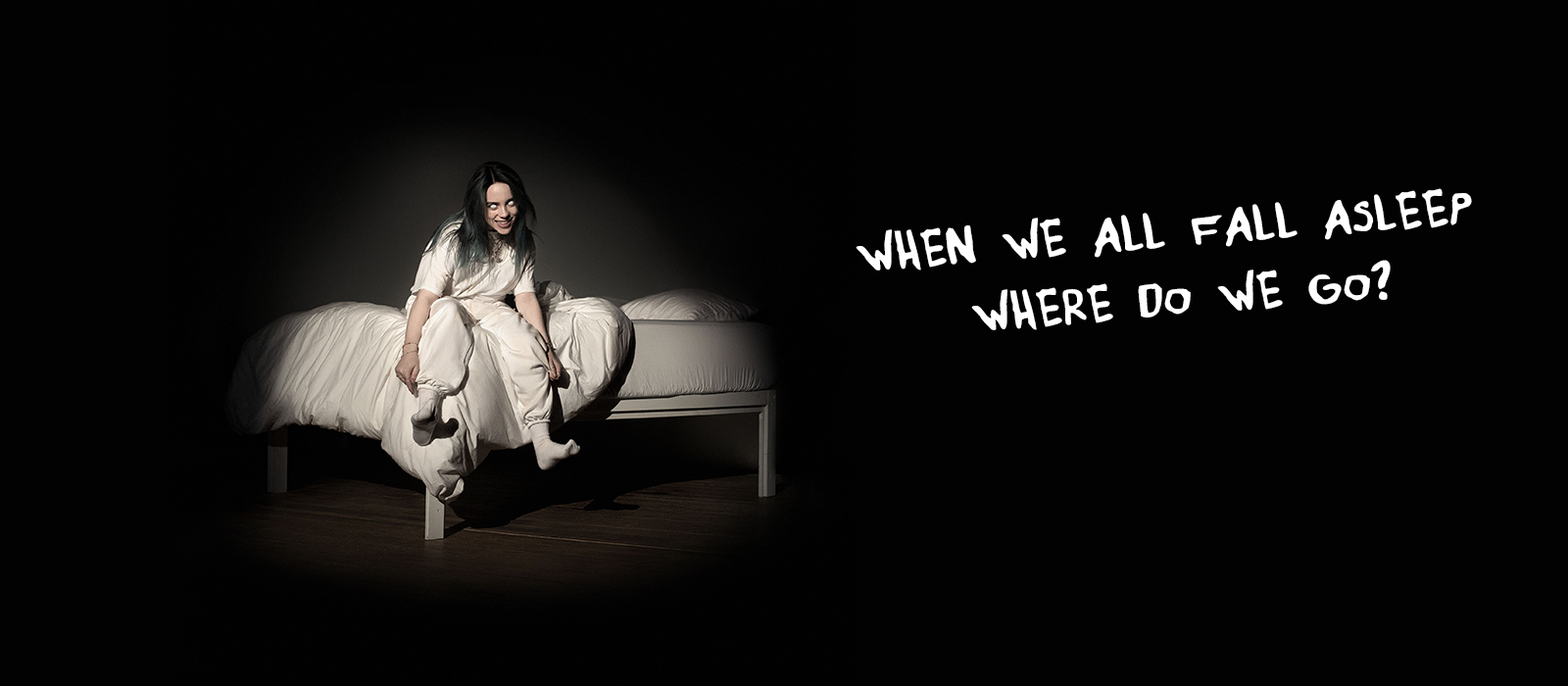
<style>
.page{position:relative;width:1568px;height:686px;background:#020202}
.page>*{position:absolute;margin:0}
.t1{font:57.2px "Whenweallfallasleep-Regular";color:#ffffff}
</style>
<div class="page">
<p class="t1" style="left:856px;top:188px;width:616px;height:142px;text-align:center;rotate:-4deg">WHEN WE ALL FALL ASLEEP <br>WHERE DO WE GO?</p>
</div>
